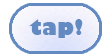
<style>
.page{position:relative;width:109px;height:56px;background:#ffffff}
.page>*{position:absolute;margin:0}
.t1{font:20.8px "GillSans-UltraBold";letter-spacing:0.025em;color:#648ac2}
</style>
<div class="page">
<p class="t1" style="left:29px;top:19px;width:54px;height:19px">tap!</p>
</div>
